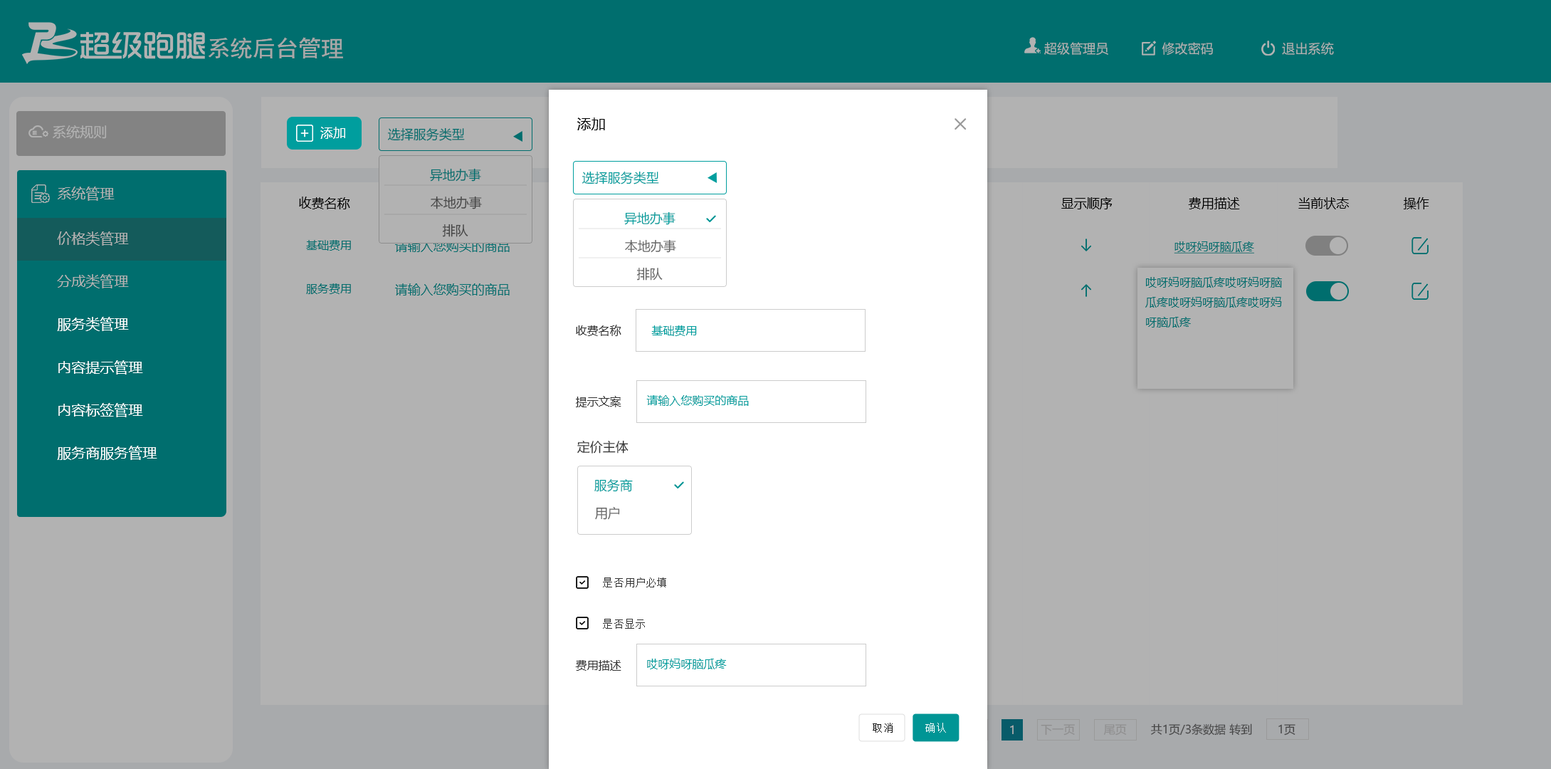
<style>
.page{position:relative;width:1551px;height:769px;background:#b2b2b2}
.page>*{position:absolute;margin:0}
.t1{font:22.9px "SimHei";color:#a8a8a8}
.t2{font:12.9px "MicrosoftYaHei";color:#b2b2b2}
.t3{font:13.7px "MicrosoftYaHei";color:#b2b2b2}
.t4{font:14.2px "MicrosoftYaHei";color:#000000}
.t5{font:12.8px "MicrosoftYaHei";color:#ffffff}
.t6{font:12.8px "MicrosoftYaHei";color:#006e6e}
.t7{font:12.8px "MicrosoftYaHei";color:#009e9e}
.t8{font:14.2px "MicrosoftYaHei";color:#b2b2b2}
.t9{font:12.8px "MicrosoftYaHei";color:#000000}
.t10{font:12.8px "MicrosoftYaHei";color:#474747}
.t11{font:11.4px "MicrosoftYaHei";color:#006e6e}
.t12{font:12.8px "MicrosoftYaHei"}
.t13{font:12.8px "MicrosoftYaHei";color:#666666}
.t14{font:11.4px "MicrosoftYaHei";color:#006e6e;text-decoration:underline}
.t15{font:14.2px "MicrosoftYaHei";color:#ffffff}
.t16{font:11.4px "MicrosoftYaHei";color:#333333}
.t17{font:11.4px "MicrosoftYaHei";color:#009e9e}
.t18{font:12.8px "MicrosoftYaHei";color:#333333}
.t19{font:10px "AdobeHeitiStd-Regular";letter-spacing:0.075em;color:#333333}
.t20{font:10.8px "SimSun";letter-spacing:0.075em;color:#111111}
.t21{font:10.8px "SimSun";letter-spacing:0.075em;color:#ffffff}
.t22{font:11.4px "MicrosoftYaHei";color:#b2b2b2}
.t23{font:11.4px "MicrosoftYaHei";color:#8e8e8e}
.t24{font:11.4px "MicrosoftYaHei";color:#464646}
</style>
<div class="page">
<p class="t1" style="left:209px;top:37px;width:134px;height:22px">系统后台管理</p>
<p class="t2" style="left:1044px;top:42px;width:290px;height:13px">超级管理员              修改密码                  退出系统</p>
<p class="t3" style="left:53px;top:125px;width:54px;height:14px">系统规则</p>
<p class="t4" style="left:577px;top:117px;width:28px;height:13px">添加</p>
<p class="t5" style="left:320px;top:127px;width:25px;height:12px">添加</p>
<p class="t6" style="left:388px;top:127px;width:77px;height:14px">选择服务类型</p>
<p class="t6" style="left:430px;top:168px;width:51px;height:14px">异地办事</p>
<p class="t7" style="left:582px;top:171px;width:77px;height:13px">选择服务类型</p>
<p class="t8" style="left:58px;top:186px;width:57px;height:15px">系统管理</p>
<p class="t9" style="left:299px;top:196px;width:51px;height:13px">收费名称</p>
<p class="t10" style="left:431px;top:196px;width:51px;height:13px">本地办事</p>
<p class="t9" style="left:1061px;top:197px;width:52px;height:12px">显示顺序</p>
<p class="t9" style="left:1188px;top:197px;width:52px;height:12px">费用描述</p>
<p class="t9" style="left:1298px;top:197px;width:51px;height:12px">当前状态</p>
<p class="t9" style="left:1404px;top:197px;width:25px;height:12px">操作</p>
<p class="t7" style="left:624px;top:211px;width:52px;height:14px">异地办事</p>
<p class="t8" style="left:57px;top:231px;width:72px;height:15px">价格类管理</p>
<p class="t10" style="left:443px;top:224px;width:25px;height:13px">排队</p>
<p class="t11" style="left:306px;top:240px;width:45px;height:11px">基础费用</p>
<p class="t12" style="left:395px;top:240px;width:115px;height:12px">请输入您购买的商品</p>
<p class="t13" style="left:625px;top:239px;width:51px;height:14px">本地办事</p>
<p class="t14" style="left:1174px;top:241px;width:80px;height:12px">哎呀妈呀脑瓜疼</p>
<p class="t13" style="left:637px;top:267px;width:26px;height:13px">排队</p>
<p class="t8" style="left:57px;top:274px;width:72px;height:14px">分成类管理</p>
<p class="t11" style="left:1145px;top:277px;width:137px;height:50px">哎呀妈呀脑瓜疼哎呀妈呀脑<br>瓜疼哎呀妈呀脑瓜疼哎呀妈<br>呀脑瓜疼</p>
<p class="t11" style="left:306px;top:283px;width:45px;height:11px">服务费用</p>
<p class="t6" style="left:395px;top:283px;width:115px;height:12px">请输入您购买的商品</p>
<p class="t15" style="left:57px;top:317px;width:72px;height:14px">服务类管理</p>
<p class="t16" style="left:576px;top:325px;width:45px;height:11px">收费名称</p>
<p class="t17" style="left:651px;top:325px;width:46px;height:11px">基础费用</p>
<p class="t15" style="left:58px;top:360px;width:85px;height:14px">内容提示管理</p>
<p class="t16" style="left:576px;top:396px;width:45px;height:11px">提示文案</p>
<p class="t17" style="left:646px;top:395px;width:103px;height:11px">请输入您购买的商品</p>
<p class="t15" style="left:58px;top:403px;width:85px;height:14px">内容标签管理</p>
<p class="t15" style="left:57px;top:446px;width:100px;height:14px">服务商服务管理</p>
<p class="t18" style="left:577px;top:440px;width:52px;height:13px">定价主体</p>
<p class="t7" style="left:594px;top:478px;width:39px;height:14px">服务商</p>
<p class="t13" style="left:595px;top:507px;width:25px;height:13px">用户</p>
<p class="t19" style="left:603px;top:577px;width:63px;height:10px">是否用户必填</p>
<p class="t19" style="left:603px;top:619px;width:42px;height:10px">是否显示</p>
<p class="t16" style="left:575px;top:660px;width:46px;height:11px">费用描述</p>
<p class="t17" style="left:647px;top:658px;width:80px;height:11px">哎呀妈呀脑瓜疼</p>
<p class="t20" style="left:873px;top:723px;width:20px;height:9px">取消</p>
<p class="t21" style="left:925px;top:723px;width:21px;height:9px">确认</p>
<p class="t22" style="left:1010px;top:725px;width:4px;height:9px">1</p>
<p class="t23" style="left:1041px;top:724px;width:34px;height:11px">下一页</p>
<p class="t23" style="left:1104px;top:724px;width:23px;height:11px">尾页</p>
<p class="t24" style="left:1151px;top:723px;width:101px;height:12px">共1页/3条数据 转到</p>
<p class="t24" style="left:1278px;top:724px;width:18px;height:11px">1页</p>
</div>
